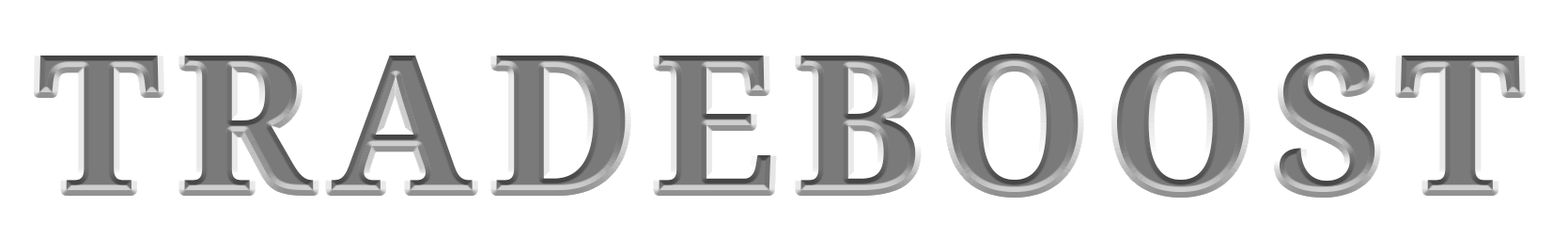
<style>
.page{position:relative;width:1568px;height:239px;background:#ffffff}
.page>*{position:absolute;margin:0}
.t1{font:187.9px "NotoSerif-Bold";letter-spacing:0.1em;color:#7a7a7a}
</style>
<div class="page">
<p class="t1" style="left:39px;top:54px;width:1481px;height:138px">TRADEBOOST</p>
</div>
